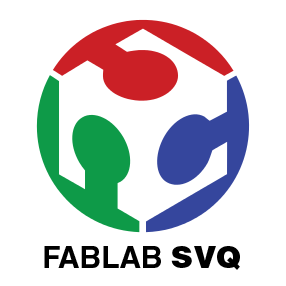
<style>
.page{position:relative;width:286px;height:286px;background:#ffffff}
.page>*{position:absolute;margin:0}
.t1{font:30px "HelveticaLTStd-Bold";color:#000000}
.t2{font:30px "HelveticaLTStd-Blk";color:#000000}
</style>
<div class="page">
<p class="t1" style="left:44px;top:246px;width:196px;height:24px">FABLAB <span class="t2">SVQ</span></p>
</div>
